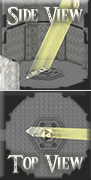
<style>
.page{position:relative;width:91px;height:180px}
.page>*{position:absolute;margin:0}
.t1{font:20px "Triforce";color:#ffffff}
.t2{font:20px "Triforce"}
</style>
<div class="page">
<p class="t1" style="left:7px;top:6px;width:76px;height:19px">Side View</p>
<p class="t2" style="left:7px;top:155px;width:77px;height:18px">Top View</p>
</div>
